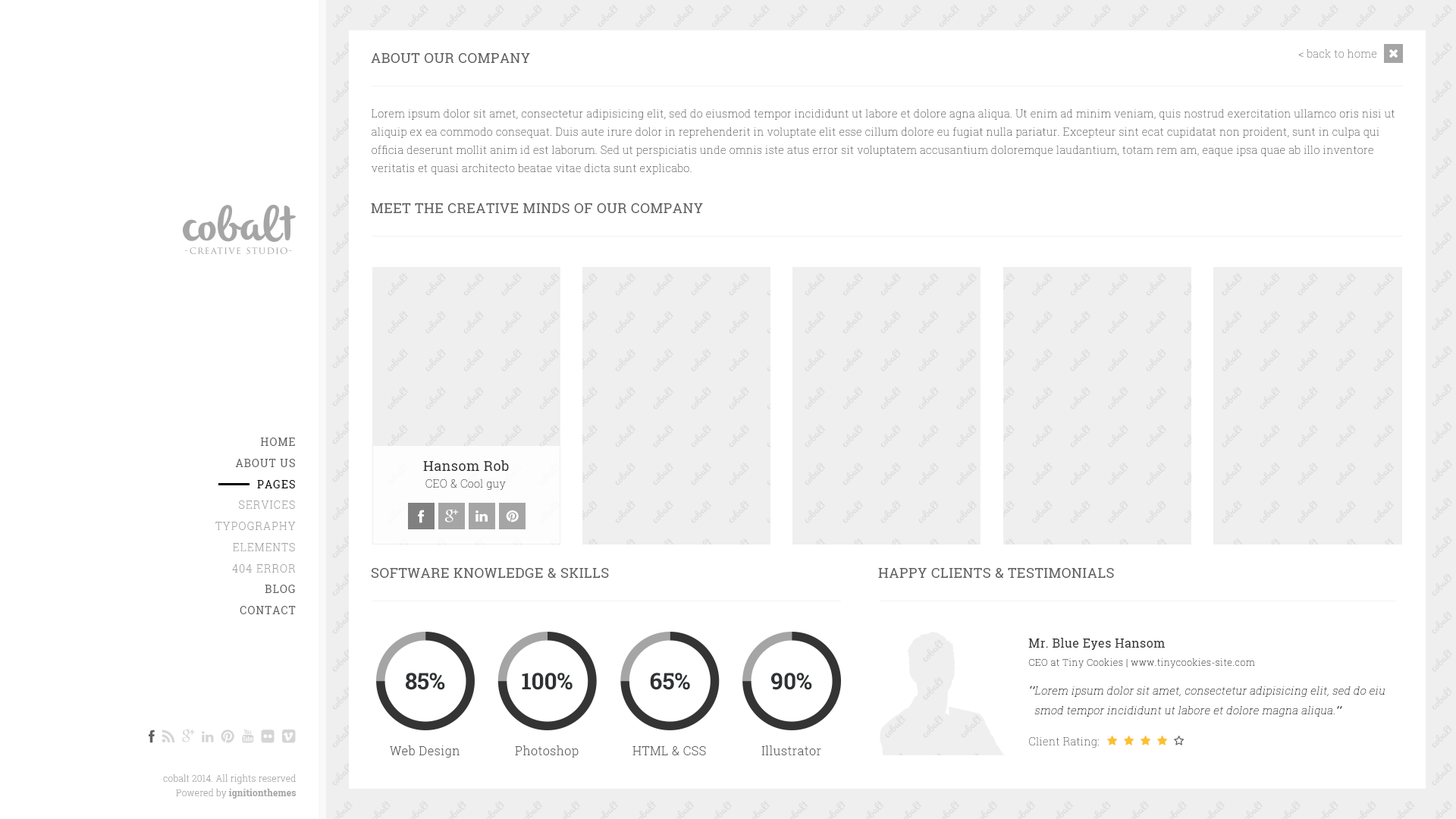
<style>
.page{position:relative;width:1456px;height:819px;background:#ffffff}
.page>*{position:absolute;margin:0}
.t1{font:13.6px "RobotoSlab-Regular";letter-spacing:0.03em;color:#606060;text-transform:uppercase}
.t2{font:10.6px "RobotoSlab-Thin";letter-spacing:0.03em;color:#808080}
.t3{font:10.6px/18.2px "RobotoSlab-Thin";letter-spacing:0.03em;color:#606060}
.t4{font:10.6px/21.2px "RobotoSlab-Regular";letter-spacing:0.08em;color:#606060}
.t5{font:10.6px/21.2px "RobotoSlab-Regular";letter-spacing:0.08em;color:#000000}
.t6{font:13.6px "RobotoSlab-Regular";letter-spacing:0.03em;color:#343434}
.t7{font:10.6px "RobotoSlab-Thin";letter-spacing:0.03em;color:#343434}
.t8{font:10.6px/21.2px "RobotoSlab-Light";letter-spacing:0.08em;color:#a5a5a5}
.t9{font:9.1px/20.5px "RobotoSlab-Thin";letter-spacing:0.05em;color:#343434}
.t10{font:12.1px/20.5px "RobotoSlab-Regular";letter-spacing:0.03em;color:#343434}
.t11{font:22.7px "RobotoSlab-Bold";color:#2f3133}
.t12{font:10.6px/19.7px "RobotoSlab-Thin";letter-spacing:0.03em;color:#171717;font-style:italic}
.t13{font:10.6px "RobotoSlab-Thin";letter-spacing:0.03em;color:#606060}
.t14{font:12.1px "RobotoSlab-Light";letter-spacing:0.03em;color:#606060}
.t15{font:9.1px/14.4px "RobotoSlab-Light";letter-spacing:0.01em;color:#a5a5a5}
.t16{font:9.1px/14.4px "RobotoSlab-Bold";letter-spacing:0.01em;color:#a5a5a5}
</style>
<div class="page">
<p class="t1" style="left:371px;top:53px;width:159px;height:10px">ABOUT OUR COMPANY</p>
<p class="t2" style="left:1298px;top:49px;width:78px;height:9px">&lt; back to home</p>
<p class="t3" style="left:372px;top:109px;width:1023px;height:65px">Lorem ipsum dolor sit amet, consectetur adipisicing elit, sed do eiusmod tempor incididunt ut labore et dolore agna aliqua. Ut enim ad minim veniam, quis nostrud exercitation ullamco oris nisi ut aliquip ex ea commodo consequat. Duis aute irure dolor in reprehenderit in voluptate elit esse cillum dolore eu fugiat nulla pariatur. Excepteur sint ecat cupidatat non proident, sunt in culpa qui officia deserunt mollit anim id est laborum. Sed ut perspiciatis unde omnis iste atus error sit voluptatem accusantium doloremque laudantium, totam rem am, eaque ipsa quae ab illo inventore veritatis et quasi architecto beatae vitae dicta sunt explicabo.</p>
<p class="t1" style="left:371px;top:203px;width:332px;height:10px">meet the creative minds of our company</p>
<p class="t4" style="left:235px;top:438px;width:60px;height:50px;text-align:right">HOME<br>ABOUT US<br><span class="t5">PAGES</span></p>
<p class="t6" style="left:423px;top:460px;width:86px;height:11px">Hansom Rob</p>
<p class="t7" style="left:425px;top:479px;width:81px;height:11px">CEO &amp; Cool guy</p>
<p class="t8" style="left:215px;top:500px;width:81px;height:73px;text-align:right">SERVICES<br>TYPOGRAPHY<br>ELEMENTS<br>404 ERROR</p>
<p class="t1" style="left:371px;top:568px;width:238px;height:10px">SOFTWARE KNOWLEDGE &amp; SKILLS</p>
<p class="t1" style="left:878px;top:568px;width:236px;height:10px">HAPPy clients &amp; TEstimonials</p>
<p class="t4" style="left:240px;top:585px;width:56px;height:29px;text-align:right">BLOG<br>CONTACT</p>
<p class="t9" style="left:1028px;top:638px;width:227px;height:30px"><span class="t10">Mr. Blue Eyes Hansom<br></span>CEO at Tiny Cookies | www.tinycookies-site.com</p>
<p class="t11" style="left:406px;top:673px;width:39px;height:17px">85%</p>
<p class="t11" style="left:522px;top:673px;width:51px;height:17px">100%</p>
<p class="t11" style="left:650px;top:673px;width:40px;height:17px">65%</p>
<p class="t11" style="left:771px;top:673px;width:41px;height:17px">90%</p>
<p class="t12" style="left:1030px;top:686px;width:355px;height:31px">“”Lorem ipsum dolor sit amet, consectetur adipisicing elit, sed do eiu<br>  smod tempor incididunt ut labore et dolore magna aliqua.””</p>
<p class="t13" style="left:1029px;top:737px;width:70px;height:11px">Client Rating:</p>
<p class="t14" style="left:390px;top:745px;width:70px;height:13px">Web Design</p>
<p class="t14" style="left:515px;top:745px;width:64px;height:13px">Photoshop</p>
<p class="t14" style="left:632px;top:746px;width:74px;height:9px">HTML &amp; CSS</p>
<p class="t14" style="left:761px;top:745px;width:60px;height:10px">Illustrator</p>
<p class="t15" style="left:163px;top:774px;width:133px;height:25px;text-align:right">cobalt 2014. All rights reserved<br>Powered by <span class="t16">ignitionthemes</span></p>
</div>
